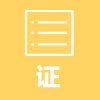
<style>
.page{position:relative;width:100px;height:100px;background:#ffd463}
.page>*{position:absolute;margin:0}
.t1{font:24px "MicrosoftYaHei-Bold";color:#ffffff}
</style>
<div class="page">
<p class="t1" style="left:36px;top:65px;width:24px;height:23px">证</p>
</div>
